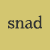
<style>
.page{position:relative;width:50px;height:50px;background:#d3c670}
.page>*{position:absolute;margin:0}
.t1{font:16px "SawarabiMincho-Medium";color:#323433}
</style>
<div class="page">
<p class="t1" style="left:8px;top:15px;width:34px;height:14px">snad</p>
</div>
